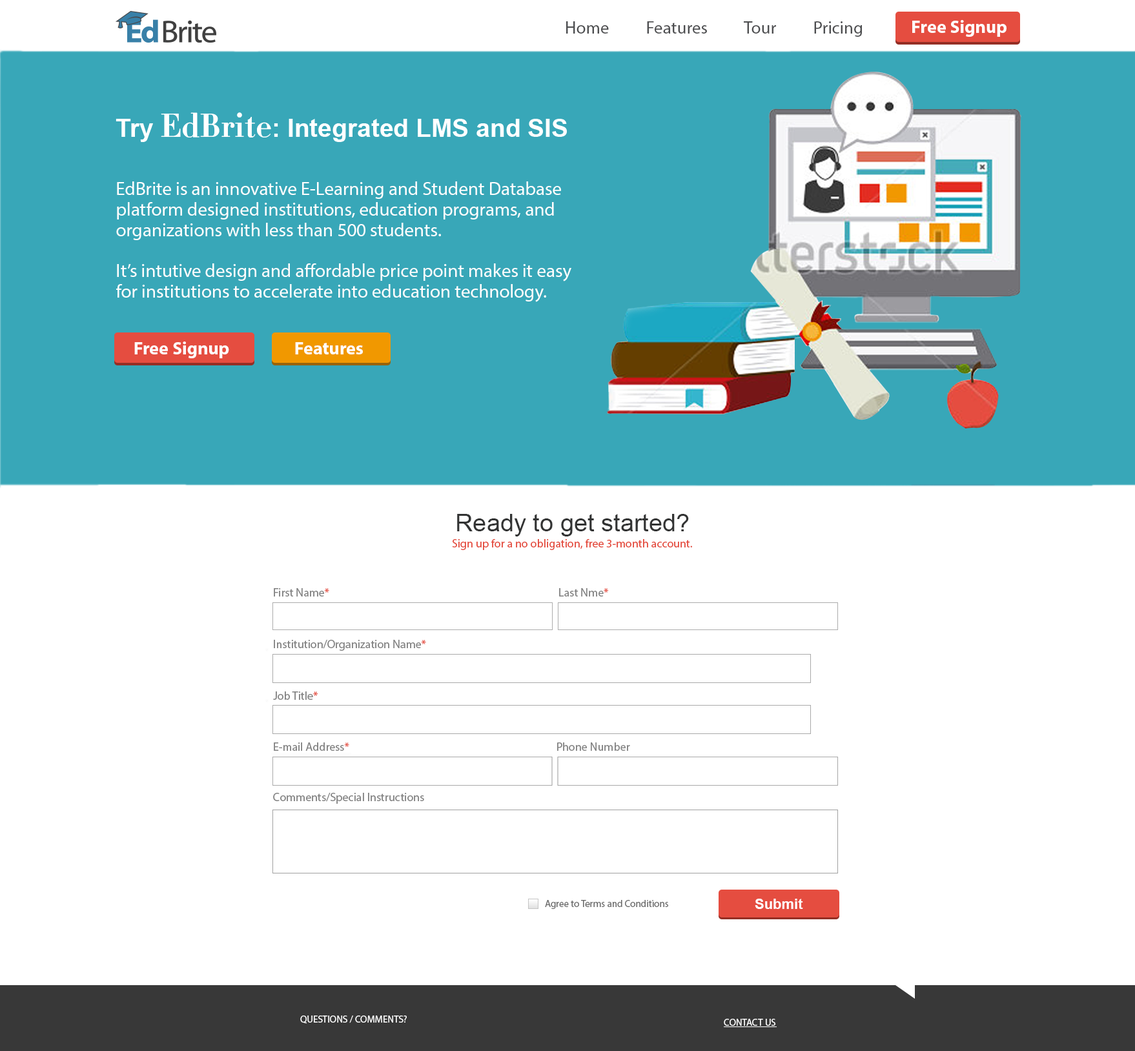
<style>
.page{position:relative;width:1135px;height:1051px;background:#ffffff}
.page>*{position:absolute;margin:0}
.t1{font:17.4px "MyriadPro-Regular";color:#4d4e50}
.t2{font:18.1px "MyriadPro-Bold";color:#ffffff}
.t3{font:25.2px "Arial-BoldMT";color:#ffffff}
.t4{font:32.9px "Didot-HTF-B11-Bold";color:#ffffff}
.t5{font:18.7px/20.5px "MyriadPro-Regular";color:#ffffff}
.t6{font:24.5px "ArialMT";color:#323333}
.t7{font:11.6px "MyriadPro-Regular";color:#e44a3c}
.t8{font:11.6px/25.2px "MyriadPro-Regular";color:#828282}
.t9{font:11.6px/25.8px "MyriadPro-Regular";color:#828282}
.t10{font:11.6px/25.8px "MyriadPro-Regular";color:#e44a3c}
.t11{font:11.6px/25.2px "MyriadPro-Regular";color:#e44a3c}
.t12{font:9.7px "MyriadPro-Regular";color:#666666}
.t13{font:14.2px "Arial-BoldMT";color:#ffffff}
.t14{font:9.7px "MyriadPro-Regular";color:#ffffff;text-transform:uppercase}
</style>
<div class="page">
<p class="t1" style="left:566px;top:21px;width:296px;height:16px">Home          Features          Tour          Pricing</p>
<p class="t2" style="left:912px;top:20px;width:94px;height:17px">Free Signup</p>
<p class="t3" style="left:116px;top:112px;width:451px;height:30px">Try <span class="t4">EdBrite</span>: Integrated LMS and SIS</p>
<p class="t5" style="left:116px;top:181px;width:455px;height:121px">EdBrite is an innovative E-Learning and Student Database platform designed institutions, education programs, and organizations with less than 500 students. <br><br>It’s intutive design and affordable price point makes it easy for institutions to accelerate into education technology.</p>
<p class="t2" style="left:134px;top:341px;width:95px;height:17px">Free Signup</p>
<p class="t2" style="left:295px;top:342px;width:68px;height:12px">Features</p>
<p class="t6" style="left:457px;top:514px;width:232px;height:22px">Ready to get started?</p>
<p class="t7" style="left:452px;top:539px;width:240px;height:11px">Sign up for a no obligation, free 3-month account.</p>
<p class="t8" style="left:273px;top:588px;width:357px;height:216px"><span class="t9">First Name</span><span class="t10">*                                                                                             </span><span class="t9">Last Nme</span><span class="t10">*<br><br></span><span class="t9">Institution/Organization Name</span><span class="t10">*<br><br></span><span class="t9">Job Title</span><span class="t10">*<br><br></span>E-mail Address<span class="t11">*                                                                                    </span>Phone Number<br><br>Comments/Special Instructions</p>
<p class="t12" style="left:545px;top:900px;width:123px;height:9px">Agree to Terms and Conditions</p>
<p class="t13" style="left:755px;top:899px;width:48px;height:10px">Submit</p>
<p class="t14" style="left:300px;top:1015px;width:107px;height:9px">Questions / Comments?</p>
<p class="t14" style="left:724px;top:1019px;width:51px;height:7px">Contact Us</p>
</div>
